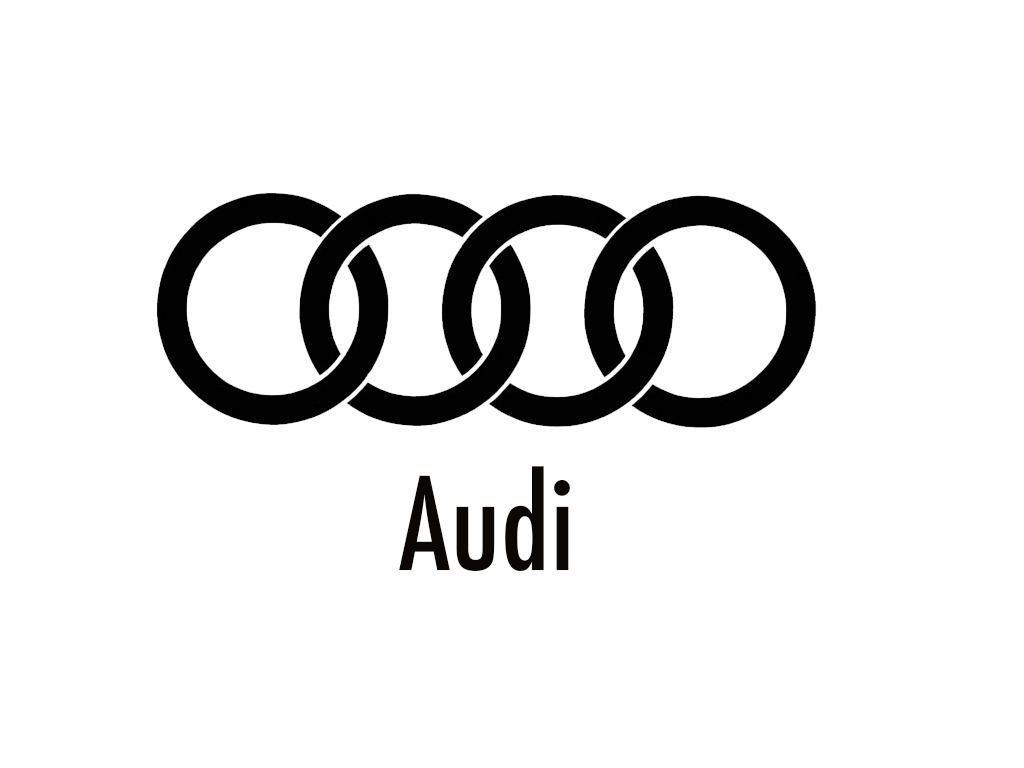
<style>
.page{position:relative;width:1024px;height:768px;background:#ffffff}
.page>*{position:absolute;margin:0}
.t1{font:125px "Futura-CondensedMedium";color:#0b0705}
.t2{font:333.3px "Futura-CondensedMedium";color:#0b0705}
</style>
<div class="page">
<p class="t1" style="left:399px;top:466px;width:171px;height:105px;text-align:center">Audi<br>M<span class="t2">M</span></p>
</div>
